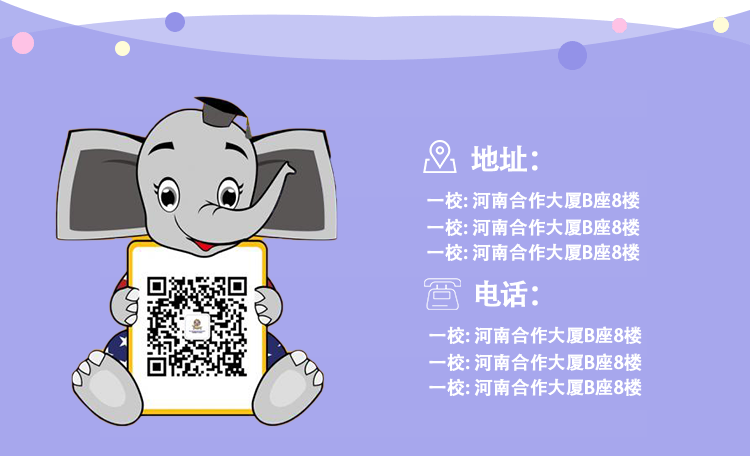
<style>
.page{position:relative;width:750px;height:456px;background:#a7a7ed}
.page>*{position:absolute;margin:0}
.t1{font:29.2px "AdobeHeitiStd-Regular";letter-spacing:-0.04em;color:#ffffff;text-transform:uppercase;font-weight:bold}
.t2{font:18px "AdobeHeitiStd-Regular";letter-spacing:-0.04em;color:#ffffff;text-transform:uppercase;font-weight:bold}
</style>
<div class="page">
<p class="t1" style="left:471px;top:145px;width:67px;height:27px">地址：</p>
<p class="t2" style="left:427px;top:191px;width:213px;height:19px">一校: 河南合作大厦B座8楼</p>
<p class="t2" style="left:427px;top:218px;width:213px;height:19px">一校: 河南合作大厦B座8楼</p>
<p class="t2" style="left:427px;top:243px;width:213px;height:19px">一校: 河南合作大厦B座8楼</p>
<p class="t1" style="left:475px;top:280px;width:63px;height:28px">电话：</p>
<p class="t2" style="left:429px;top:326px;width:213px;height:19px">一校: 河南合作大厦B座8楼</p>
<p class="t2" style="left:429px;top:353px;width:213px;height:19px">一校: 河南合作大厦B座8楼</p>
<p class="t2" style="left:429px;top:378px;width:213px;height:19px">一校: 河南合作大厦B座8楼</p>
</div>
